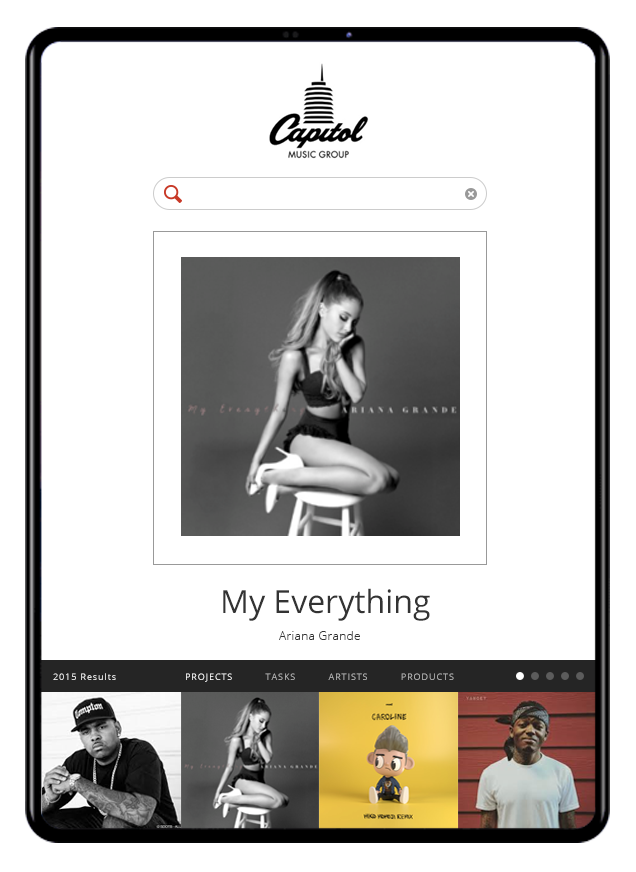
<style>
.page{position:relative;width:636px;height:872px;background:#ffffff}
.page>*{position:absolute;margin:0}
.t1{font:32px "OpenSans-Regular";color:#333333}
.t2{font:12px "OpenSans-Light";letter-spacing:0.025em;color:#333333}
.t3{font:9px "OpenSans-Regular";letter-spacing:0.1em}
.t4{font:9px "OpenSans-Regular";letter-spacing:0.1em;color:#bbbbbb}
.t5{font:9px "OpenSans-Regular";letter-spacing:0.1em;color:#ffffff}
</style>
<div class="page">
<p class="t1" style="left:223px;top:588px;width:207px;height:33px">My Everything</p>
<p class="t2" style="left:279px;top:631px;width:81px;height:9px">Ariana Grande</p>
<p class="t3" style="left:53px;top:673px;width:63px;height:7px">2015 Results</p>
<p class="t4" style="left:186px;top:673px;width:268px;height:9px"><span class="t5">PROJECTS          </span>TASKS          ARTISTS          PRODUCTS</p>
</div>
